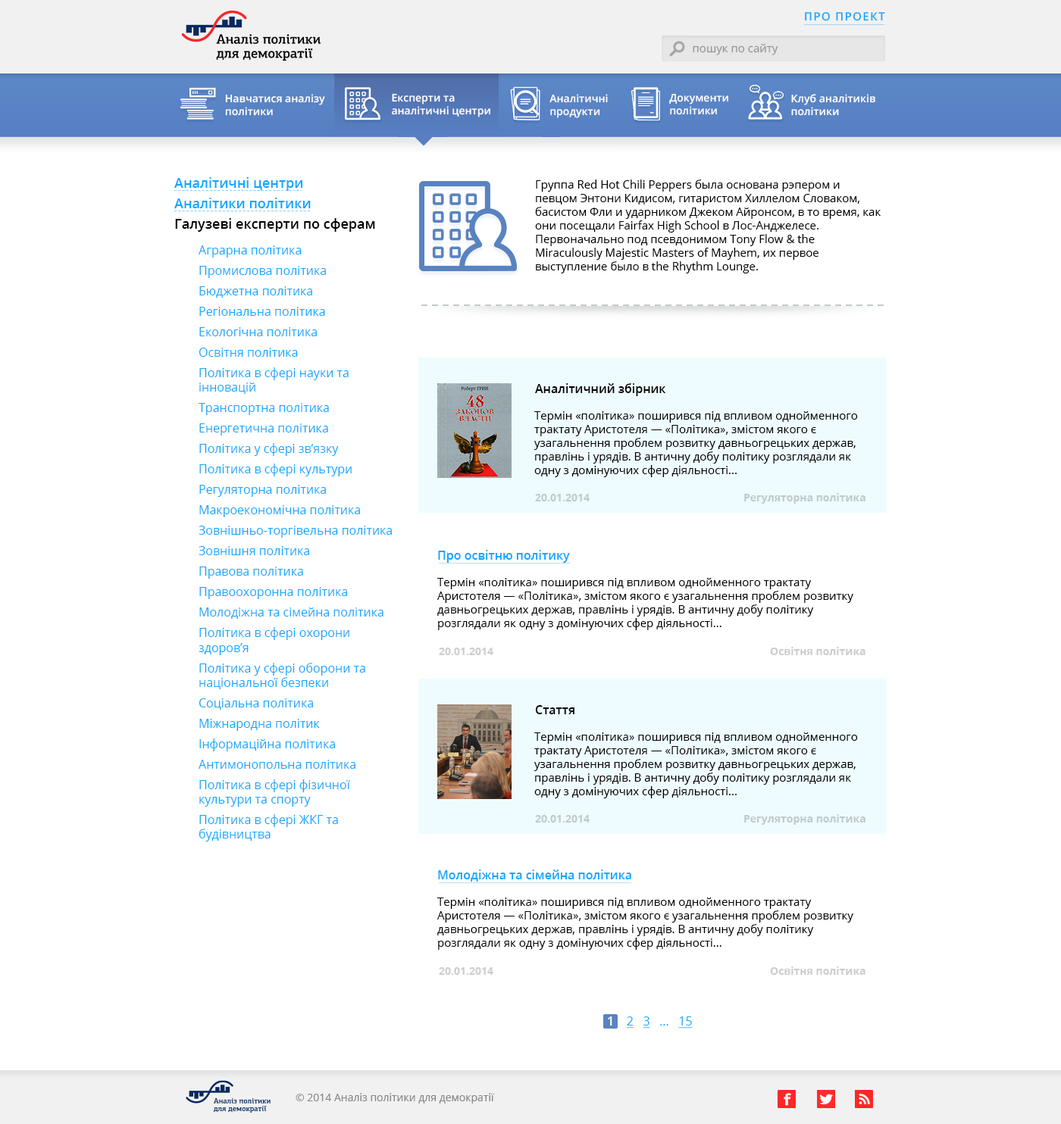
<style>
.page{position:relative;width:1061px;height:1124px;background:#ffffff}
.page>*{position:absolute;margin:0}
.t1{font:11.3px "OpenSans-Semibold";letter-spacing:0.075em;color:#0fa7ff}
.t2{font:11.4px "OpenSans";color:#959595}
.t3{font:10.6px "OpenSans-Semibold";color:#ffffff}
.t4{font:13.6px/20.5px "OpenSans-Semibold";color:#0fa7ff}
.t5{font:13.6px/20.5px "OpenSans-Semibold";color:#000000}
.t6{font:11.4px "OpenSans";color:#000000}
.t7{font:12.1px/20.5px "OpenSans";color:#0fa7ff}
.t8{font:12.1px "OpenSans";color:#0fa7ff}
.t9{font:12.1px "OpenSans-Semibold";color:#000000}
.t10{font:10.6px "OpenSans-Bold";color:#c0cacd}
.t11{font:12.1px "OpenSans-Semibold";color:#0fa7ff}
.t12{font:10.6px "OpenSans-Bold";color:#cdcdcd}
.t13{font:12.1px "OpenSans";color:#0fa7ff;text-decoration:underline}
.t14{font:12.1px "OpenSans-Semibold";color:#ffffff}
.t15{font:10.6px "OpenSans";color:#878787}
</style>
<div class="page">
<p class="t1" style="left:805px;top:12px;width:80px;height:9px">ПРО ПРОЕКТ</p>
<p class="t2" style="left:692px;top:43px;width:86px;height:12px">пошук по сайту</p>
<p class="t3" style="left:225px;top:94px;width:100px;height:22px">Навчатися аналiзу<br>полiтики</p>
<p class="t3" style="left:392px;top:93px;width:98px;height:24px">Експерти та<br>аналiтичнi центри</p>
<p class="t3" style="left:549px;top:94px;width:59px;height:24px">Аналiтичнi<br>продукти</p>
<p class="t3" style="left:669px;top:93px;width:59px;height:22px">Документи<br>полiтики</p>
<p class="t3" style="left:791px;top:94px;width:84px;height:22px">Клуб аналiтикiв<br>полiтики</p>
<p class="t4" style="left:174px;top:177px;width:201px;height:55px">Аналітичнi центри<br>Аналітики політики<br><span class="t5">Галузеві експерти по сферам</span></p>
<p class="t6" style="left:535px;top:180px;width:346px;height:93px">Группа Red Hot Chili Peppers была основана рэпером и певцом Энтони Кидисом, гитаристом Хиллелом Словаком, басистом Фли и ударником Джеком Айронсом, в то время, как они посещали Fairfax High School в Лос-Анджелесе. Первоначально под псевдонимом Tony Flow &amp; the Miraculously Majestic Masters of Mayhem, их первое выступление было в the Rhythm Lounge.</p>
<p class="t7" style="left:198px;top:245px;width:194px;height:597px">Аграрна політика<br>Промислова політика<br>Бюджетна політика<br>Регіональна політика<br>Екологічна політика<br>Освітня політика<br>Політика в сфері науки та <span class="t8">інновацій<br></span>Транспортна політика<br>Енергетична політика<br>Політика у сфері зв’язку<br>Політика в сфері культури<br>Регуляторна політика<br>Макроекономічна політика<br>Зовнішньо-торгівельна політика<br>Зовнішня політика<br>Правова політика<br>Правоохоронна політика<br>Молодіжна та сімейна політика<br>Політика в сфері охорони <span class="t8">здоров’я<br></span>Політика у сфері оборони та <span class="t8">національної безпеки<br></span>Соціальна політика<br>Міжнародна політик<br>Інформаційна політика<br>Антимонопольна політика<br>Політика в сфері фізичної <span class="t8">культури та спорту<br></span>Політика в сфері ЖКГ та <span class="t8">будівництва</span></p>
<p class="t9" style="left:535px;top:383px;width:131px;height:13px">Аналiтичний збiрник</p>
<p class="t6" style="left:534px;top:411px;width:324px;height:66px">Термін «політика» поширився під впливом однойменного трактату Аристотеля — «Політика», змістом якого є узагальнення проблем розвитку давньогрецьких держав, правлінь і урядів. В античну добу політику розглядали як одну з домінуючих сфер діяльності...</p>
<p class="t10" style="left:535px;top:494px;width:54px;height:8px">20.01.2014</p>
<p class="t10" style="left:744px;top:493px;width:121px;height:11px">Регуляторна полiтика</p>
<p class="t11" style="left:438px;top:550px;width:132px;height:13px">Про освiтню полiтику</p>
<p class="t6" style="left:437px;top:578px;width:416px;height:52px">Термін «політика» поширився під впливом однойменного трактату Аристотеля — «Політика», змістом якого є узагальнення проблем розвитку давньогрецьких держав, правлінь і урядів. В античну добу політику розглядали як одну з домінуючих сфер діяльності...</p>
<p class="t12" style="left:439px;top:648px;width:54px;height:7px">20.01.2014</p>
<p class="t12" style="left:770px;top:647px;width:95px;height:8px">Освiтня полiтика</p>
<p class="t9" style="left:535px;top:705px;width:39px;height:9px">Стаття</p>
<p class="t6" style="left:534px;top:733px;width:324px;height:66px">Термін «політика» поширився під впливом однойменного трактату Аристотеля — «Політика», змістом якого є узагальнення проблем розвитку давньогрецьких держав, правлінь і урядів. В античну добу політику розглядали як одну з домінуючих сфер діяльності...</p>
<p class="t10" style="left:535px;top:815px;width:54px;height:8px">20.01.2014</p>
<p class="t10" style="left:744px;top:814px;width:121px;height:11px">Регуляторна полiтика</p>
<p class="t11" style="left:438px;top:870px;width:193px;height:12px">Молодiжна та сiмейна полiтика</p>
<p class="t6" style="left:437px;top:898px;width:416px;height:52px">Термін «політика» поширився під впливом однойменного трактату Аристотеля — «Політика», змістом якого є узагальнення проблем розвитку давньогрецьких держав, правлінь і урядів. В античну добу політику розглядали як одну з домінуючих сфер діяльності...</p>
<p class="t12" style="left:439px;top:967px;width:54px;height:8px">20.01.2014</p>
<p class="t12" style="left:770px;top:967px;width:95px;height:8px">Освiтня полiтика</p>
<p class="t13" style="left:608px;top:1017px;width:84px;height:12px"><span class="t14">1    </span>2   3<span class="t8">   ...   </span>15</p>
<p class="t15" style="left:295px;top:1093px;width:200px;height:11px">© 2014 Аналiз полiтики для демократiї</p>
</div>
